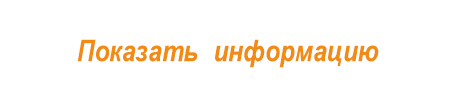
<style>
.page{position:relative;width:450px;height:100px;background:#ffffff}
.page>*{position:absolute;margin:0}
.t1{font:30px "ArialNarrow-BoldItalic";color:#f28b11}
</style>
<div class="page">
<p class="t1" style="left:77px;top:39px;width:302px;height:29px">Показать информацию</p>
</div>
